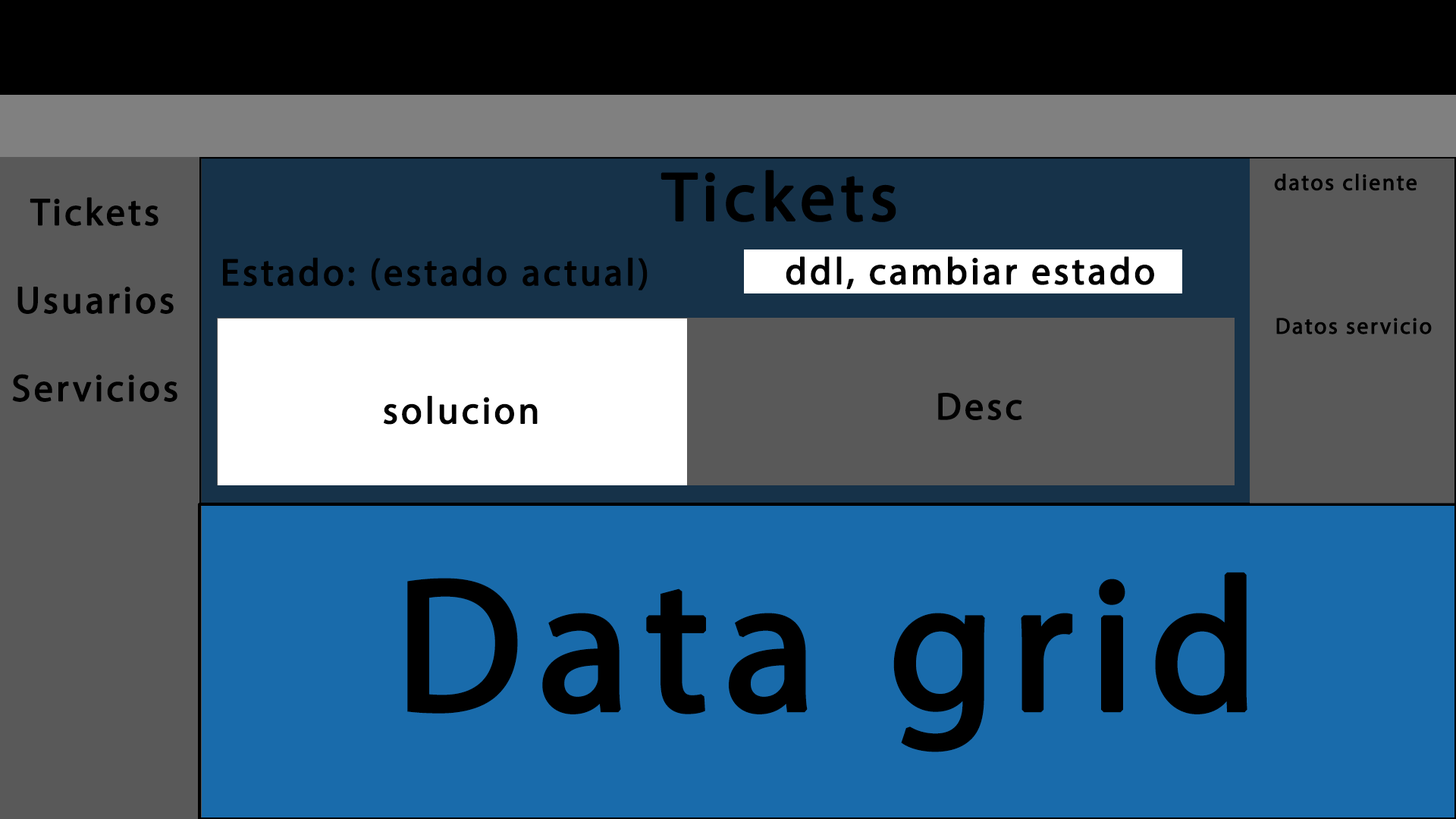
<style>
.page{position:relative;width:1456px;height:819px;background:#196bab}
.page>*{position:absolute;margin:0}
.t1{font:69.5px "MyriadPro-Regular";letter-spacing:0.06em;color:#000000;font-weight:bold}
.t2{font:22.5px "MyriadPro-Regular";letter-spacing:0.06em;color:#000000;font-weight:bold}
.t3{font:37.9px/88px "MyriadPro-Regular";letter-spacing:0.06em;color:#000000;font-weight:bold}
.t4{font:37.9px "MyriadPro-Regular";letter-spacing:0.06em;color:#000000;font-weight:bold}
.t5{font:189.6px "MyriadPro-Regular";letter-spacing:0.06em;color:#000000;font-weight:bold}
</style>
<div class="page">
<p class="t1" style="left:660px;top:170px;width:236px;height:52px">Tickets</p>
<p class="t2" style="left:1274px;top:174px;width:143px;height:17px">datos cliente</p>
<p class="t3" style="left:12px;top:197px;width:165px;height:205px;text-align:center">Tickets<br>Usuarios<br>Servicios</p>
<p class="t4" style="left:223px;top:257px;width:425px;height:33px">Estado: (estado actual)</p>
<p class="t4" style="left:786px;top:256px;width:368px;height:34px">ddl, cambiar estado</p>
<p class="t2" style="left:1276px;top:318px;width:156px;height:16px">Datos servicio</p>
<p class="t4" style="left:383px;top:396px;width:155px;height:29px">solucion</p>
<p class="t4" style="left:938px;top:393px;width:84px;height:27px">Desc</p>
<p class="t5" style="left:407px;top:572px;width:840px;height:180px">Data grid</p>
</div>
